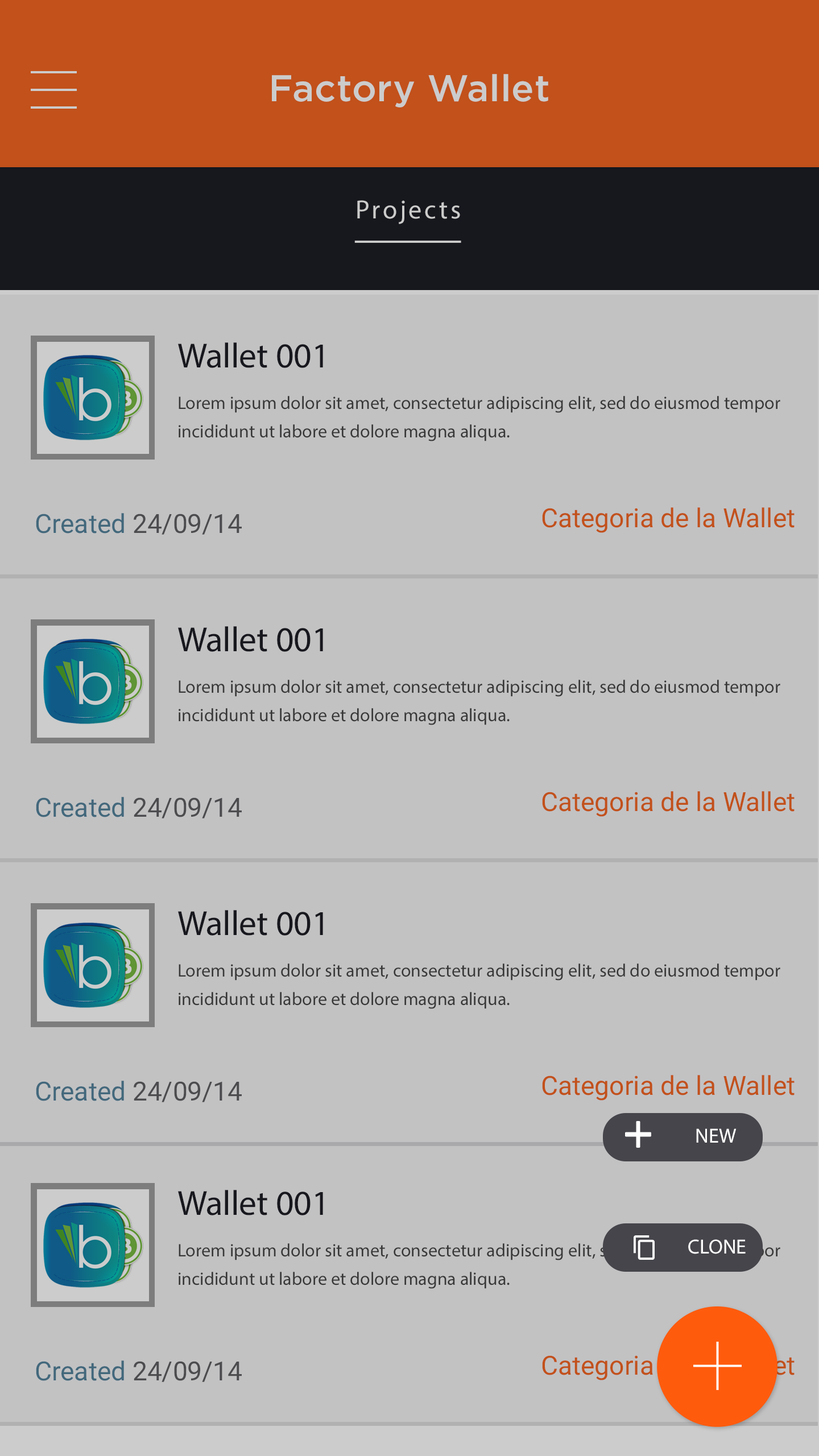
<style>
.page{position:relative;width:819px;height:1456px;background:#c2c2c3}
.page>*{position:absolute;margin:0}
.t1{font:37.2px "Gotham-Medium";letter-spacing:0.015em;color:#cccccc}
.t2{font:26.3px "MyriadPro-Regular";letter-spacing:0.1em;color:#cccccc}
.t3{font:35px "MyriadPro-Regular";color:#1d1d26}
.t4{font:18.2px/28.4px "MyriadPro-Regular";color:#454545}
.t5{font:26.3px "Roboto-Regular";color:#c2511b}
.t6{font:26.3px "Roboto-Regular"}
.t7{font:20.5px "MyriadPro-Regular";color:#ffffff;text-transform:uppercase}
</style>
<div class="page">
<p class="t1" style="left:272px;top:74px;width:276px;height:33px">Factory Wallet</p>
<p class="t2" style="left:357px;top:200px;width:103px;height:24px">Projects</p>
<p class="t3" style="left:178px;top:342px;width:145px;height:26px">Wallet 001</p>
<p class="t4" style="left:179px;top:396px;width:601px;height:45px">Lorem ipsum dolor sit amet, consectetur adipiscing elit, sed do eiusmod tempor incididunt ut labore et dolore magna aliqua.</p>
<p class="t5" style="left:542px;top:507px;width:253px;height:26px">Categoria de la Wallet</p>
<p class="t6" style="left:36px;top:513px;width:206px;height:22px">Created 24/09/14</p>
<p class="t3" style="left:178px;top:626px;width:145px;height:26px">Wallet 001</p>
<p class="t4" style="left:179px;top:680px;width:601px;height:45px">Lorem ipsum dolor sit amet, consectetur adipiscing elit, sed do eiusmod tempor incididunt ut labore et dolore magna aliqua.</p>
<p class="t6" style="left:36px;top:797px;width:206px;height:21px">Created 24/09/14</p>
<p class="t5" style="left:542px;top:791px;width:253px;height:26px">Categoria de la Wallet</p>
<p class="t3" style="left:178px;top:910px;width:145px;height:26px">Wallet 001</p>
<p class="t4" style="left:179px;top:963px;width:601px;height:46px">Lorem ipsum dolor sit amet, consectetur adipiscing elit, sed do eiusmod tempor incididunt ut labore et dolore magna aliqua.</p>
<p class="t6" style="left:36px;top:1081px;width:206px;height:21px">Created 24/09/14</p>
<p class="t5" style="left:542px;top:1075px;width:253px;height:26px">Categoria de la Wallet</p>
<p class="t7" style="left:696px;top:1128px;width:41px;height:15px">NEw</p>
<p class="t3" style="left:178px;top:1190px;width:145px;height:25px">Wallet 001</p>
<p class="t7" style="left:688px;top:1239px;width:58px;height:15px">Clone</p>
<p class="t4" style="left:179px;top:1243px;width:601px;height:46px">Lorem ipsum dolor sit amet, consectetur adipiscing elit, sed do eiusmod tempor incididunt ut labore et dolore magna aliqua.</p>
<p class="t6" style="left:36px;top:1360px;width:206px;height:22px">Created 24/09/14</p>
<p class="t6" style="left:542px;top:1355px;width:253px;height:25px">Categoria de la Wallet</p>
</div>
